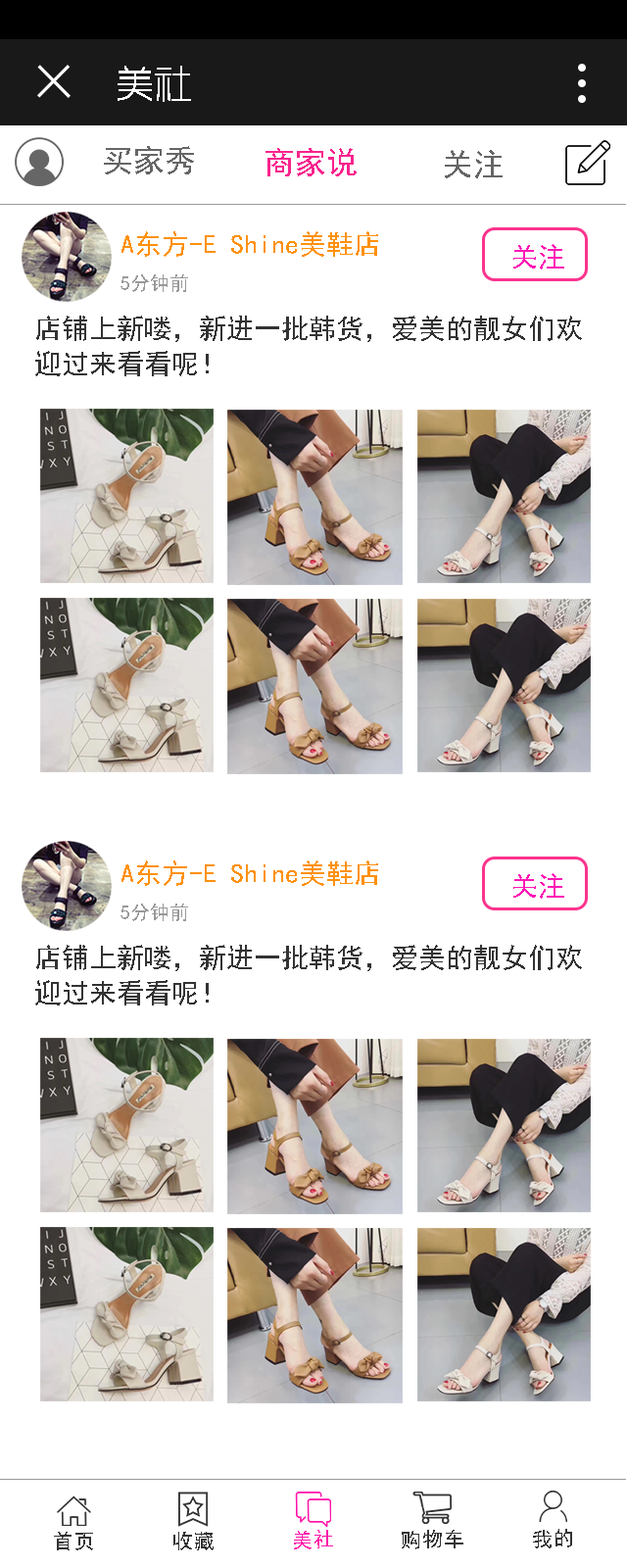
<style>
.page{position:relative;width:627px;height:1568px;background:#ffffff}
.page>*{position:absolute;margin:0}
.t1{font:37.2px "RTWSYueGoG0v1-ExLight";color:#ffffff;font-weight:bold}
.t2{font:31.4px "SimHei";color:#666666}
.t3{font:31.4px "SimHei";color:#f9238d}
.t4{font:27.4px "SimHei";color:#ff910f}
.t5{font:27.4px "SimHei";color:#ff17b5}
.t6{font:19.6px "SimHei";color:#999999}
.t7{font:27.4px/35.3px "SimHei";color:#333333}
.t8{font:35.3px "SimHei";color:#ff16aa}
.t9{font:35.3px "SimHei";color:#333333}
</style>
<div class="page">
<p class="t1" style="left:118px;top:66px;width:73px;height:36px">美社</p>
<p class="t2" style="left:104px;top:146px;width:90px;height:28px">买家秀</p>
<p class="t3" style="left:266px;top:148px;width:91px;height:28px">商家说</p>
<p class="t2" style="left:445px;top:150px;width:58px;height:28px">关注</p>
<p class="t4" style="left:122px;top:231px;width:256px;height:26px">A东方-E Shine美鞋店</p>
<p class="t5" style="left:514px;top:244px;width:50px;height:26px">关注</p>
<p class="t6" style="left:121px;top:274px;width:67px;height:18px">5分钟前</p>
<p class="t7" style="left:35px;top:316px;width:547px;height:60px">店铺上新喽，新进一批韩货，爱美的靓女们欢迎过来看看呢！</p>
<p class="t4" style="left:122px;top:860px;width:256px;height:26px">A东方-E Shine美鞋店</p>
<p class="t5" style="left:514px;top:873px;width:50px;height:26px">关注</p>
<p class="t6" style="left:121px;top:904px;width:67px;height:17px">5分钟前</p>
<p class="t7" style="left:35px;top:945px;width:547px;height:60px">店铺上新喽，新进一批韩货，爱美的靓女们欢迎过来看看呢！</p>
<p class="t8" style="left:294px;top:1530px;width:39px;height:19px;rotate:-1deg">美社</p>
<p class="t9" style="left:402px;top:1530px;width:62px;height:19px;rotate:-1deg">购物车</p>
<p class="t9" style="left:533px;top:1529px;width:39px;height:19px;rotate:-1deg">我的</p>
<p class="t9" style="left:54px;top:1532px;width:39px;height:18px;rotate:-1deg">首页</p>
<p class="t9" style="left:173px;top:1532px;width:41px;height:18px;rotate:-1deg">收藏</p>
</div>
